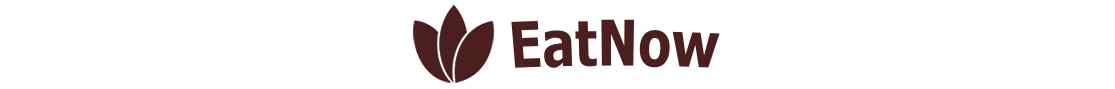
<style>
.page{position:relative;width:1115px;height:89px;background:#ffffff}
.page>*{position:absolute;margin:0}
.t1{font:62.6px "Tahoma-Bold";letter-spacing:0.02em;color:#4b1f1f;scale:0.8 1}
</style>
<div class="page">
<p class="t1" style="left:511px;top:19px;width:209px;height:49px">EatNow</p>
</div>
